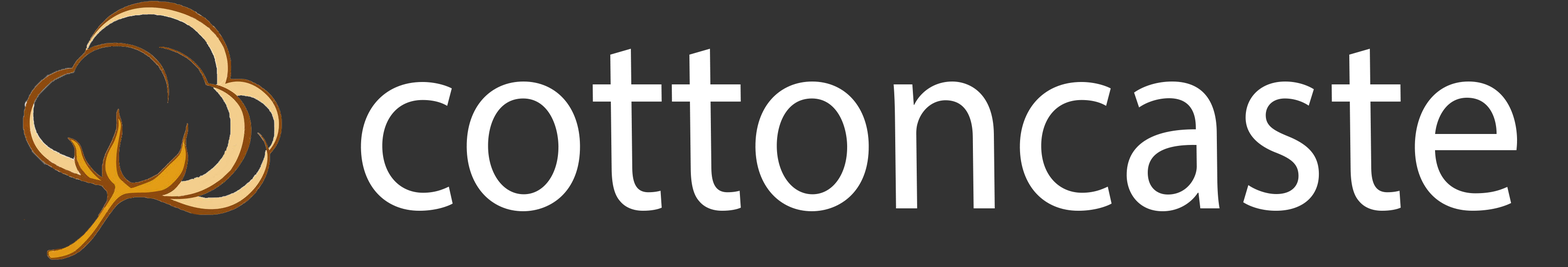
<style>
.page{position:relative;width:1568px;height:267px;background:#333333}
.page>*{position:absolute;margin:0}
.t1{font:256.4px "MyriadPro-Regular";color:#ffffff;scale:0.93 1}
</style>
<div class="page">
<p class="t1" style="left:361px;top:49px;width:1156px;height:162px">cottoncaste</p>
</div>
